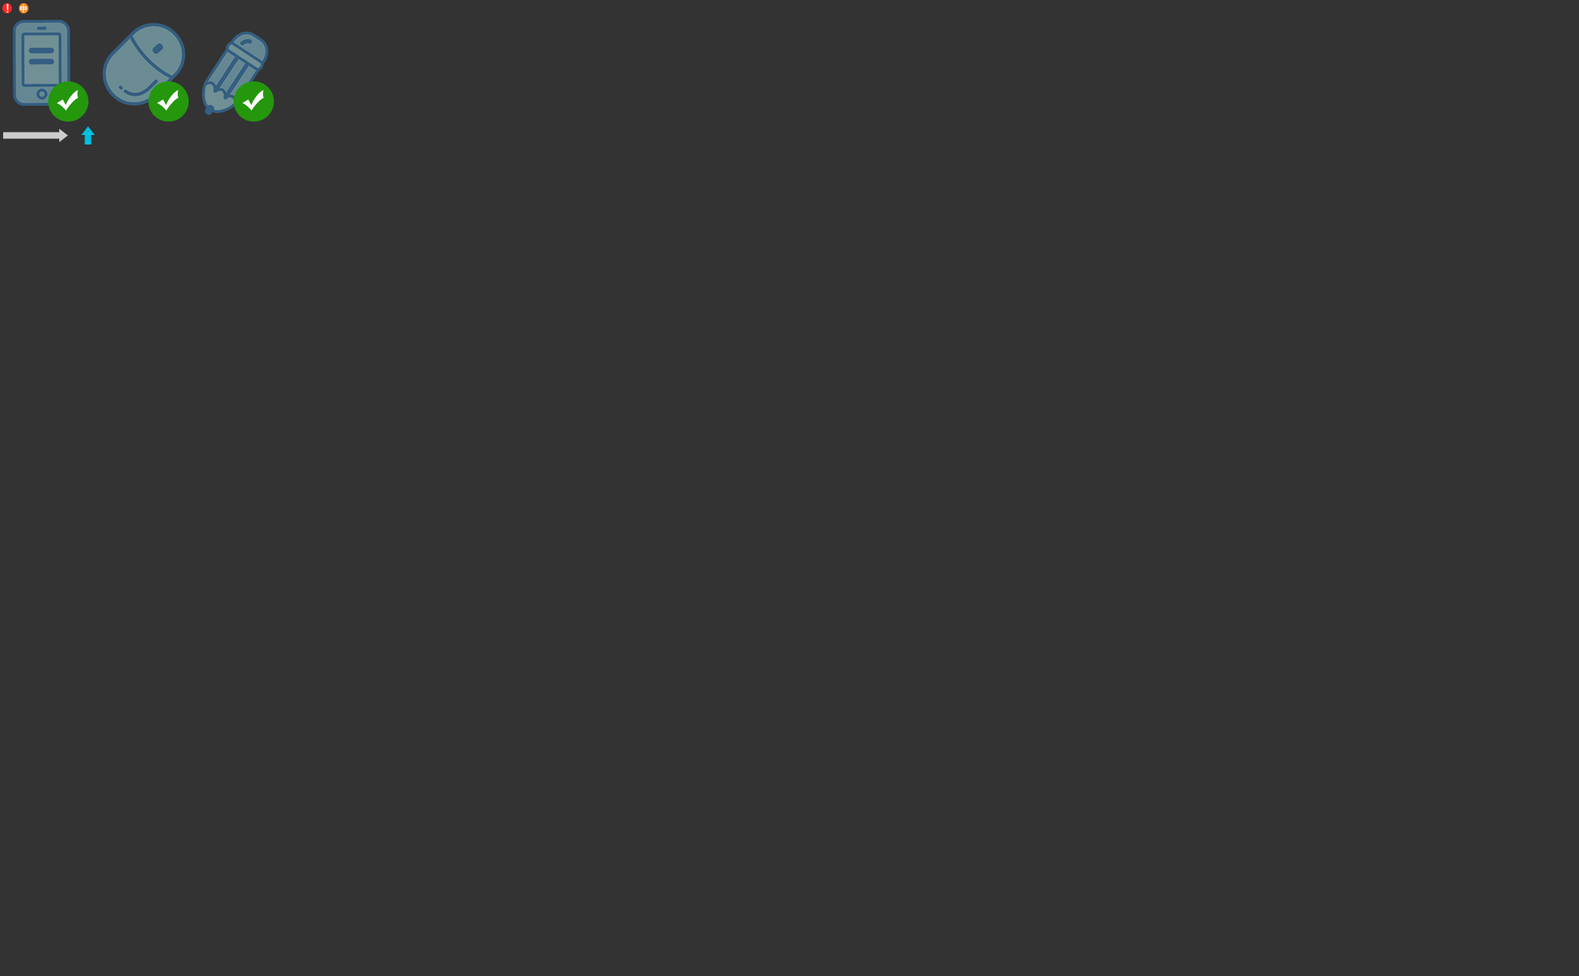
<style>
.page{position:relative;width:1579px;height:976px;background:#333333}
.page>*{position:absolute;margin:0}
.t1{font:10.9px "MicrosoftYaHei";color:#ffffff}
.t2{font:7.1px "MicrosoftYaHei";color:#ffffff}
</style>
<div class="page">
<p class="t1" style="left:6px;top:4px;width:3px;height:9px">!</p>
<p class="t2" style="left:20px;top:5px;width:7px;height:8px">中</p>
</div>
